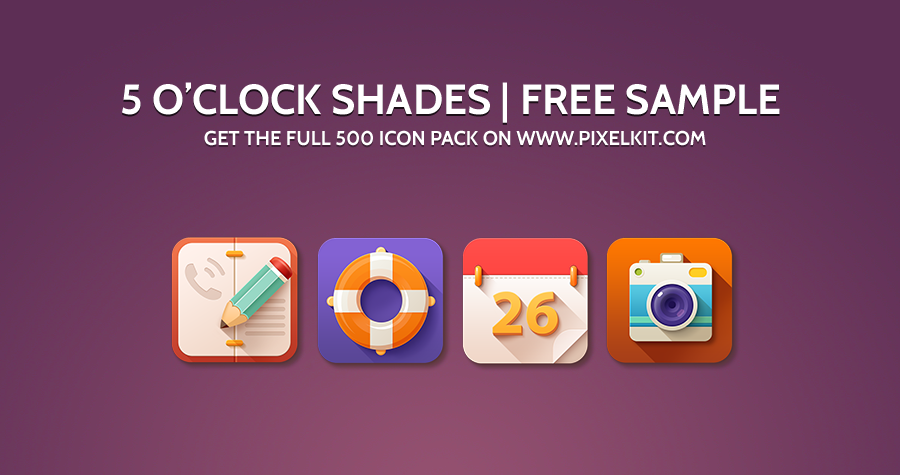
<style>
.page{position:relative;width:900px;height:475px}
.page>*{position:absolute;margin:0}
.t1{font:42px "Cabin-Bold";color:#ffffff;text-transform:uppercase}
.t2{font:20px "Cabin-Bold";color:#ffffff;text-transform:uppercase}
</style>
<div class="page">
<p class="t1" style="left:122px;top:82px;width:658px;height:41px">5 o’clock shades | Free Sample</p>
<p class="t2" style="left:204px;top:130px;width:502px;height:16px">Get the full 500 ICON pack on www.PixelKit.com</p>
</div>
